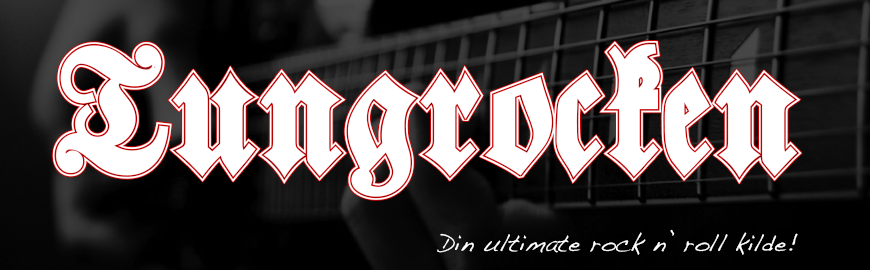
<style>
.page{position:relative;width:870px;height:270px}
.page>*{position:absolute;margin:0}
.t1{font:170.7px "Walbaum-Fraktur-Inline-Bold";color:#ffffff}
.t2{font:24px "Handwriting-Dakota";color:#ffffff}
</style>
<div class="page">
<p class="t1" style="left:52px;top:41px;width:750px;height:159px">Tungrocken</p>
<p class="t2" style="left:437px;top:229px;width:361px;height:26px">Din ultimate rock n’ roll kilde!</p>
</div>
